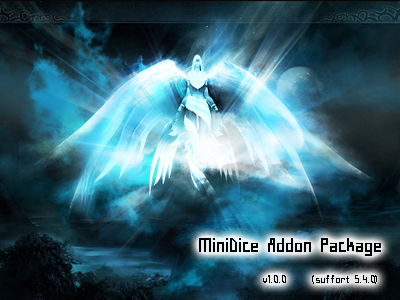
<style>
.page{position:relative;width:400px;height:300px}
.page>*{position:absolute;margin:0}
.t1{font:14px "H2sa1M";color:#000000}
.t2{font:24px "H2sa1M";color:#000000}
</style>
<div class="page">
<p class="t1" style="left:199px;top:238px;width:182px;height:46px"><span class="t2">MiniDice Addon Package<br>        </span>v1.0.0     (suffort 5.4.0)</p>
</div>
